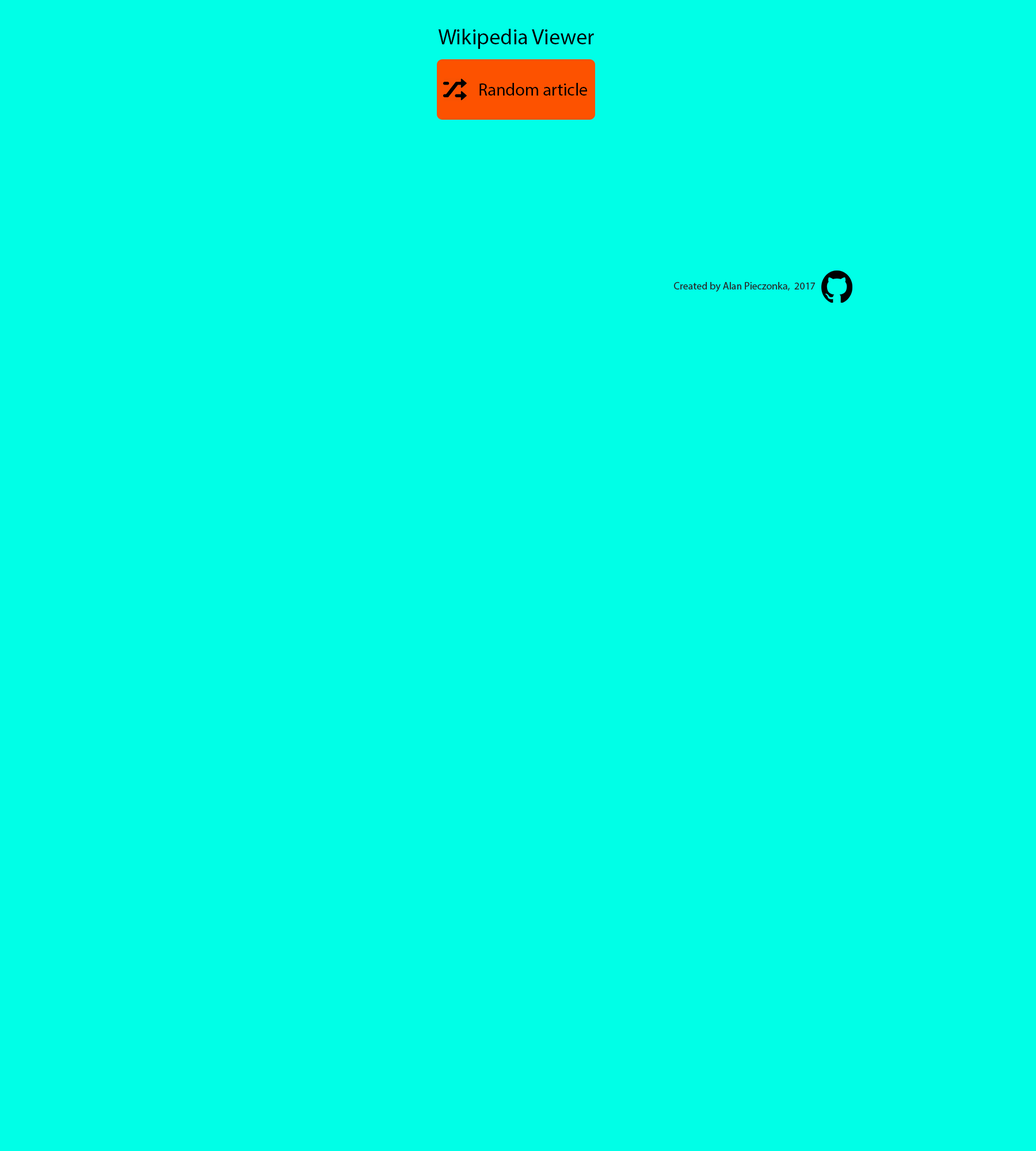
<style>
.page{position:relative;width:1036px;height:1151px;background:#00ffe7}
.page>*{position:absolute;margin:0}
.t1{font:21.9px "MyriadPro-Regular";color:#000000}
.t2{font:17.3px "MyriadPro-Regular";color:#000000}
.t3{font:10.4px "MyriadPro-Regular";color:#262626}
</style>
<div class="page">
<p class="t1" style="left:438px;top:29px;width:156px;height:20px">Wikipedia Viewer</p>
<p class="t2" style="left:479px;top:83px;width:108px;height:13px">Random article</p>
<p class="t3" style="left:674px;top:282px;width:141px;height:10px">Created by Alan Pieczonka,  2017</p>
</div>
